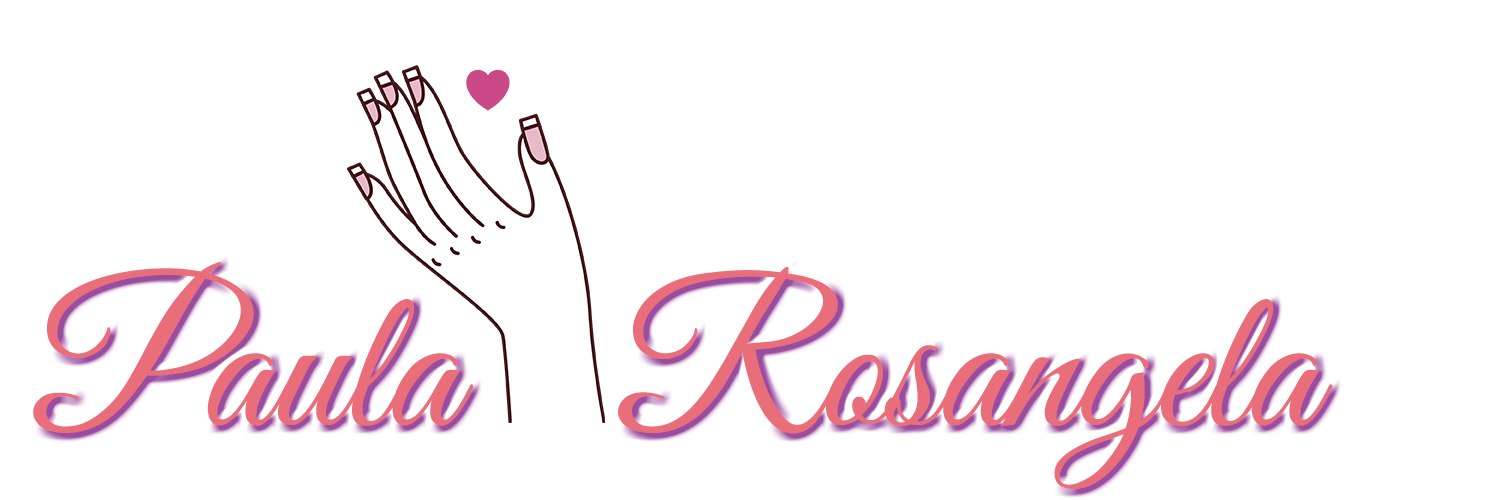
<style>
.page{position:relative;width:1500px;height:500px;background:#ffffff}
.page>*{position:absolute;margin:0}
.t1{font:200px "GreatVibes-Regular";color:#e96e79}
</style>
<div class="page">
<p class="t1" style="left:33px;top:262px;width:1300px;height:227px">Paula   Rosangela</p>
</div>
